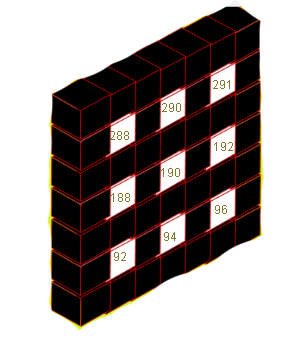
<style>
.page{position:relative;width:301px;height:342px;background:#ffffff}
.page>*{position:absolute;margin:0}
.t1{font:12px "ArialMT";color:#817931}
</style>
<div class="page">
<p class="t1" style="left:213px;top:80px;width:17px;height:9px">291</p>
<p class="t1" style="left:162px;top:103px;width:19px;height:9px">290</p>
<p class="t1" style="left:110px;top:131px;width:19px;height:9px">288</p>
<p class="t1" style="left:214px;top:142px;width:19px;height:9px">192</p>
<p class="t1" style="left:161px;top:168px;width:19px;height:9px">190</p>
<p class="t1" style="left:111px;top:193px;width:19px;height:9px">188</p>
<p class="t1" style="left:215px;top:205px;width:12px;height:9px">96</p>
<p class="t1" style="left:164px;top:232px;width:12px;height:9px">94</p>
<p class="t1" style="left:114px;top:252px;width:12px;height:9px">92</p>
</div>
